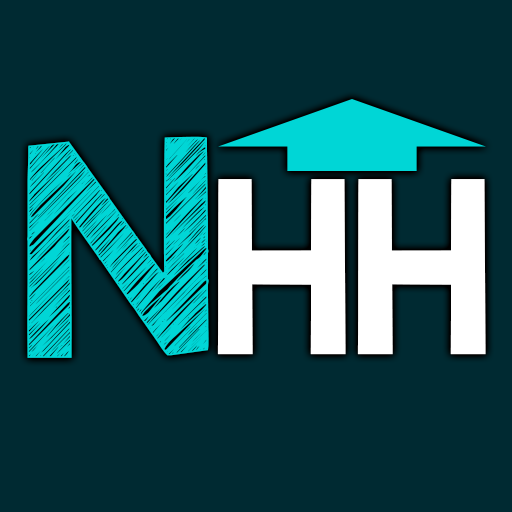
<style>
.page{position:relative;width:512px;height:512px;background:#002a32}
.page>*{position:absolute;margin:0}
.t1{font:200px "KGBlankSpaceSolid";color:#ffffff}
.t2{font:240px "KGBlankSpaceSketch";color:#00d6d6}
</style>
<div class="page">
<p class="t1" style="left:27px;top:136px;width:459px;height:222px"><span class="t2">N</span>HH</p>
</div>
